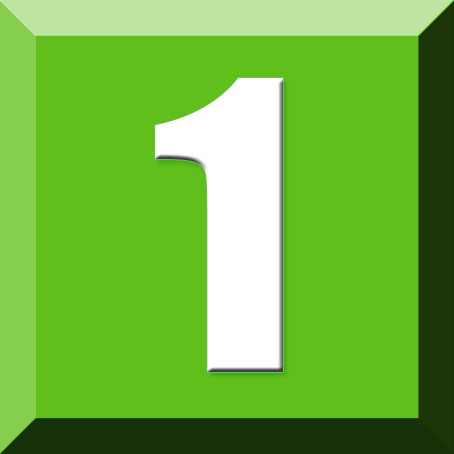
<style>
.page{position:relative;width:454px;height:454px;background:#60bf1b}
.page>*{position:absolute;margin:0}
.t1{font:372px "Impact";color:#ffffff;scale:1.03 1}
</style>
<div class="page">
<p class="t1" style="left:155px;top:77px;width:128px;height:295px">1</p>
</div>
